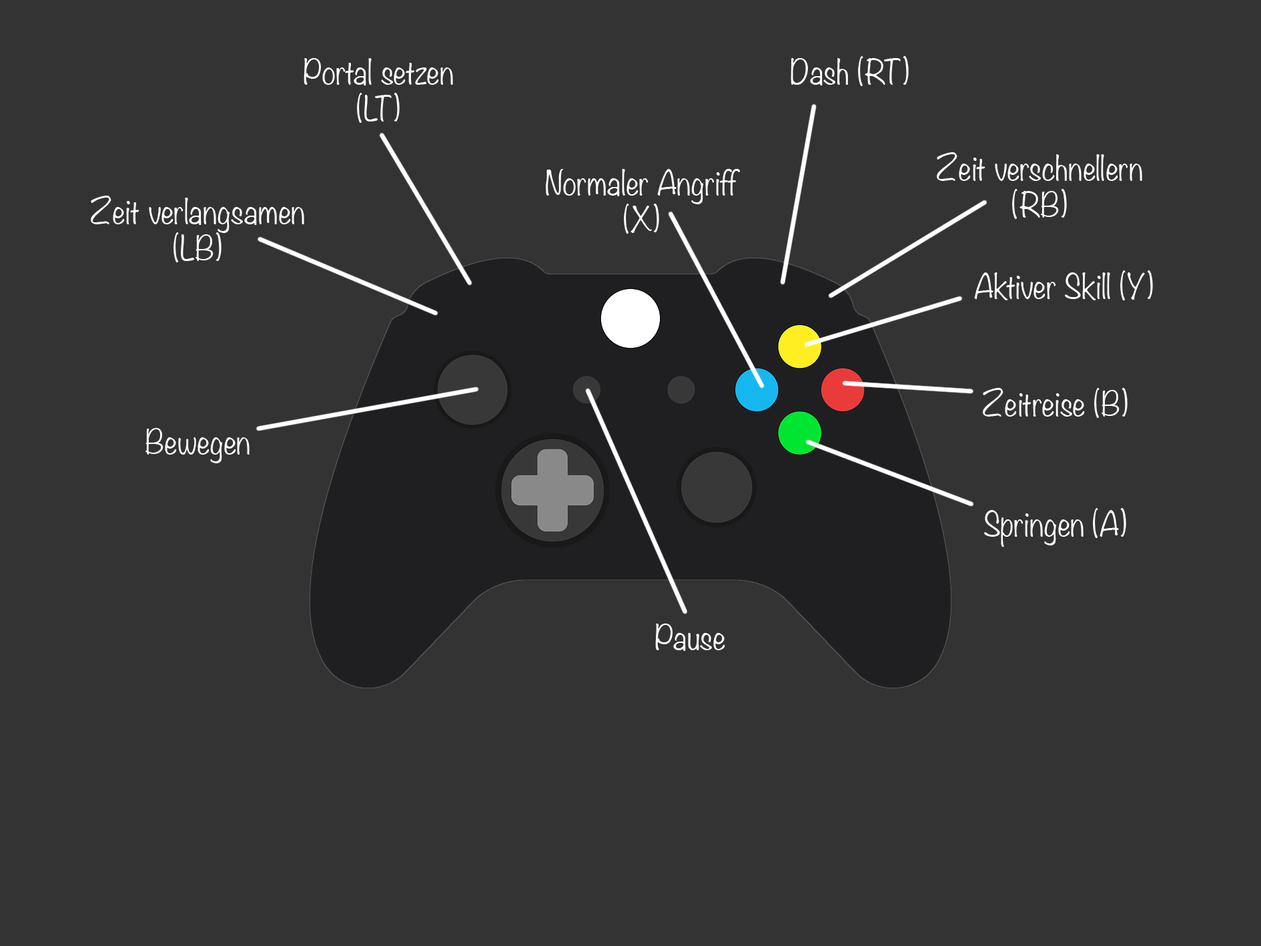
<style>
.page{position:relative;width:1261px;height:946px;background:#333333}
.page>*{position:absolute;margin:0}
.t1{font:30.6px "Noteworthy-Light";color:#ffffff}
</style>
<div class="page">
<p class="t1" style="left:304px;top:58px;width:149px;height:65px;text-align:center">Portal setzen<br>(LT)</p>
<p class="t1" style="left:791px;top:56px;width:118px;height:30px">Dash (RT)</p>
<p class="t1" style="left:937px;top:152px;width:205px;height:67px;text-align:center">Zeit verschnellern<br>(RB)</p>
<p class="t1" style="left:546px;top:169px;width:194px;height:65px;text-align:center">Normaler Angriff (X)</p>
<p class="t1" style="left:91px;top:196px;width:213px;height:66px;text-align:center">Zeit verlangsamen<br>(LB)</p>
<p class="t1" style="left:974px;top:270px;width:179px;height:30px">Aktiver Skill (Y)</p>
<p class="t1" style="left:983px;top:388px;width:145px;height:30px">Zeitreise (B)</p>
<p class="t1" style="left:145px;top:428px;width:105px;height:35px">Bewegen</p>
<p class="t1" style="left:984px;top:508px;width:142px;height:38px">Springen (A)</p>
<p class="t1" style="left:655px;top:623px;width:70px;height:28px">Pause</p>
</div>
